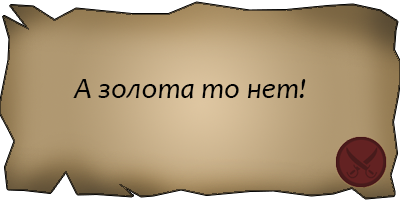
<style>
.page{position:relative;width:400px;height:200px}
.page>*{position:absolute;margin:0}
.t1{font:30px "Candara-Italic";color:#000000}
</style>
<div class="page">
<p class="t1" style="left:73px;top:79px;width:233px;height:20px">А золота то нет!</p>
</div>
